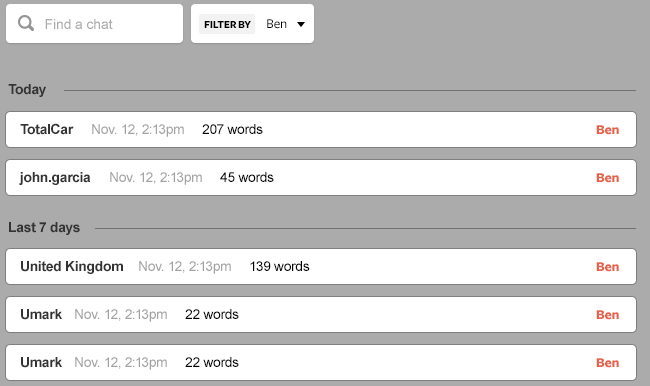
<style>
.page{position:relative;width:650px;height:386px;background:#ababab}
.page>*{position:absolute;margin:0}
.t1{font:14px "ArialMT";letter-spacing:-0.01em;color:#ababab}
.t2{font:11px "FreightSans-Bold";letter-spacing:-0.025em;color:#010000}
.t3{font:14px "FreightSans-Medium";letter-spacing:-0.025em;color:#010000}
.t4{font:14px "Arial-BoldMT";letter-spacing:-0.025em;color:#333333}
.t5{font:14px "ArialMT";letter-spacing:-0.025em;color:#a3a3a3}
.t6{font:14px "ArialMT";letter-spacing:-0.025em;color:#000000}
.t7{font:14px "FreightSans-Bold";letter-spacing:-0.025em;color:#e86249}
</style>
<div class="page">
<p class="t1" style="left:45px;top:19px;width:68px;height:10px">Find a chat</p>
<p class="t2" style="left:204px;top:21px;width:47px;height:7px">FILTER BY</p>
<p class="t3" style="left:267px;top:19px;width:20px;height:10px">Ben</p>
<p class="t4" style="left:8px;top:84px;width:38px;height:13px">Today</p>
<p class="t4" style="left:20px;top:123px;width:54px;height:12px">TotalCar</p>
<p class="t5" style="left:92px;top:124px;width:92px;height:13px">Nov. 12, 2:13pm</p>
<p class="t6" style="left:202px;top:124px;width:61px;height:10px">207 words</p>
<p class="t7" style="left:596px;top:125px;width:23px;height:10px">Ben</p>
<p class="t4" style="left:19px;top:172px;width:72px;height:13px">john.garcia</p>
<p class="t5" style="left:110px;top:172px;width:92px;height:13px">Nov. 12, 2:13pm</p>
<p class="t6" style="left:220px;top:172px;width:54px;height:10px">45 words</p>
<p class="t7" style="left:596px;top:173px;width:23px;height:10px">Ben</p>
<p class="t4" style="left:9px;top:222px;width:71px;height:13px">Last 7 days</p>
<p class="t4" style="left:21px;top:261px;width:102px;height:13px">United Kingdom</p>
<p class="t5" style="left:139px;top:261px;width:92px;height:13px">Nov. 12, 2:13pm</p>
<p class="t6" style="left:250px;top:261px;width:60px;height:10px">139 words</p>
<p class="t7" style="left:596px;top:262px;width:23px;height:10px">Ben</p>
<p class="t4" style="left:21px;top:309px;width:41px;height:11px">Umark</p>
<p class="t5" style="left:75px;top:309px;width:92px;height:13px">Nov. 12, 2:13pm</p>
<p class="t6" style="left:185px;top:309px;width:54px;height:10px">22 words</p>
<p class="t7" style="left:596px;top:310px;width:23px;height:10px">Ben</p>
<p class="t4" style="left:21px;top:357px;width:41px;height:11px">Umark</p>
<p class="t5" style="left:75px;top:357px;width:92px;height:13px">Nov. 12, 2:13pm</p>
<p class="t6" style="left:185px;top:357px;width:54px;height:10px">22 words</p>
<p class="t7" style="left:596px;top:358px;width:23px;height:10px">Ben</p>
</div>
